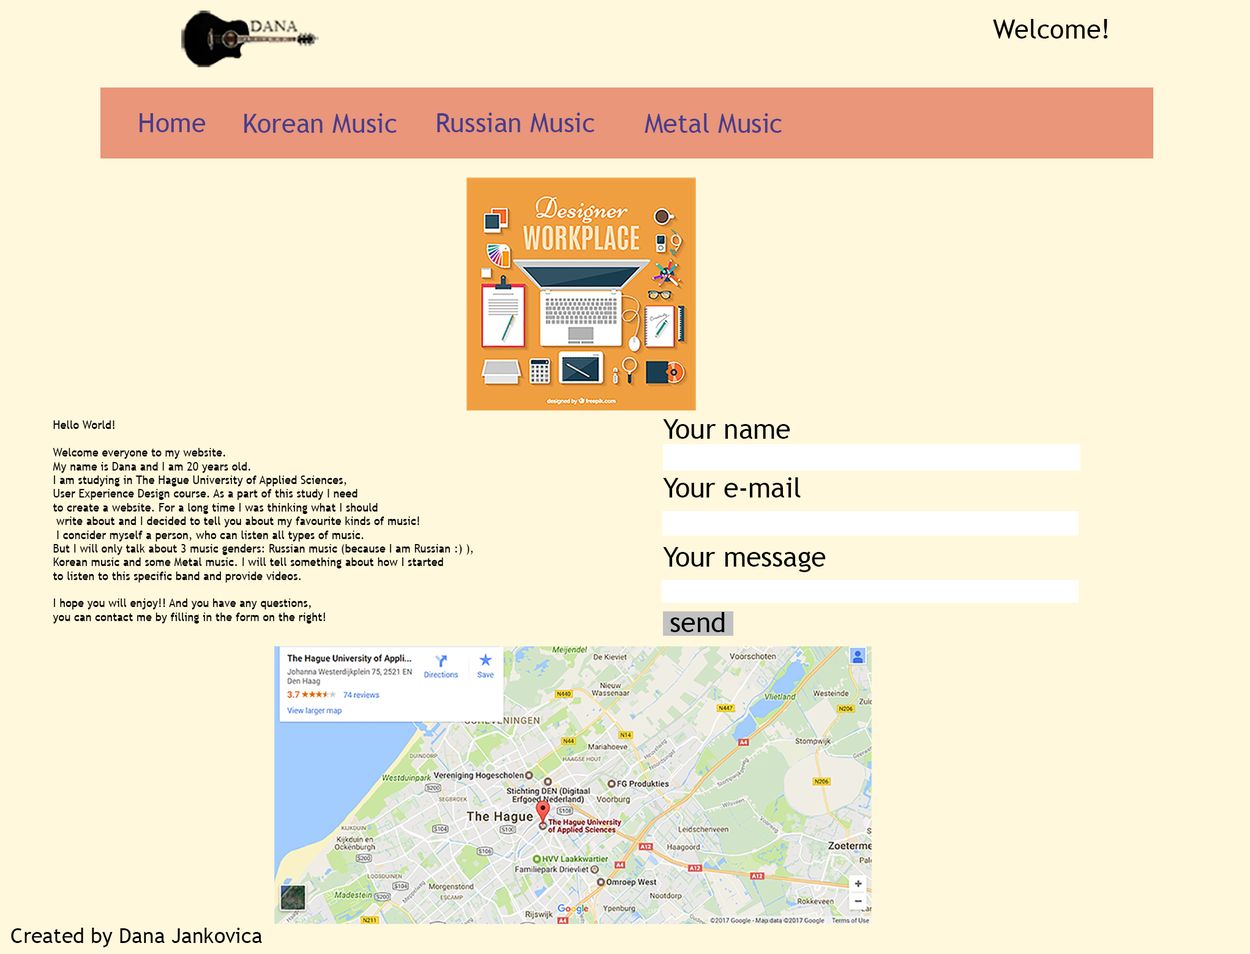
<style>
.page{position:relative;width:1250px;height:954px;background:#fff8dc}
.page>*{position:absolute;margin:0}
.t1{font:27px "TrebuchetMS";color:#000000}
.t2{font:27px "TrebuchetMS";color:#483d8b}
.t3{font:11.4px "TrebuchetMS";color:#040404}
.t4{font:27.7px "TrebuchetMS";color:#000000}
.t5{font:20.8px "TrebuchetMS";color:#000000}
</style>
<div class="page">
<p class="t1" style="left:993px;top:19px;width:115px;height:20px">Welcome!</p>
<p class="t2" style="left:140px;top:113px;width:66px;height:19px">Home</p>
<p class="t2" style="left:244px;top:113px;width:153px;height:20px">Korean Music</p>
<p class="t2" style="left:437px;top:113px;width:157px;height:19px">Russian Music</p>
<p class="t2" style="left:644px;top:113px;width:138px;height:20px">Metal Music</p>
<p class="t3" style="left:53px;top:420px;width:420px;height:204px">Hello World!<br><br>Welcome everyone to my website.<br>My name is Dana and I am 20 years old. <br>I am studying in The Hague University of Applied Sciences, <br>User Experience Design course. As a part of this study I need <br>to create a website. For a long time I was thinking what I should<br> write about and I decided to tell you about my favourite kinds of music!<br> I concider myself a person, who can listen all types of music. <br>But I will only talk about 3 music genders: Russian music (because I am Russian :) ), <br>Korean music and some Metal music. I will tell something about how I started <br>to listen to this specific band and provide videos.<br><br>I hope you will enjoy!! And you have any questions, <br>you can contact me by filling in the form on the right!</p>
<p class="t4" style="left:663px;top:419px;width:127px;height:20px">Your name</p>
<p class="t4" style="left:663px;top:477px;width:138px;height:21px">Your e-mail</p>
<p class="t4" style="left:663px;top:547px;width:163px;height:25px">Your message</p>
<p class="t4" style="left:670px;top:612px;width:55px;height:20px">send</p>
<p class="t5" style="left:11px;top:928px;width:251px;height:19px">Created by Dana Jankovica</p>
</div>
